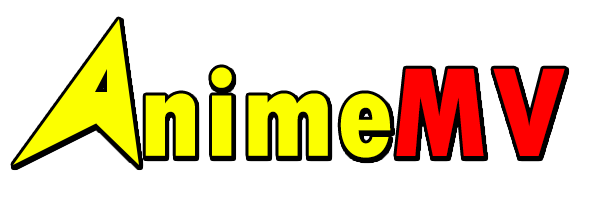
<style>
.page{position:relative;width:589px;height:221px;background:#ffffff}
.page>*{position:absolute;margin:0}
.t1{font:133.3px "TwCenMT-CondensedExtraBold";letter-spacing:0.02em;color:#fcff00}
.t2{font:133.3px "TwCenMT-CondensedExtraBold";letter-spacing:0.02em;color:#ff0000}
</style>
<div class="page">
<p class="t1" style="left:145px;top:67px;width:246px;height:91px">nime</p>
<p class="t2" style="left:396px;top:68px;width:169px;height:88px">MV</p>
</div>
